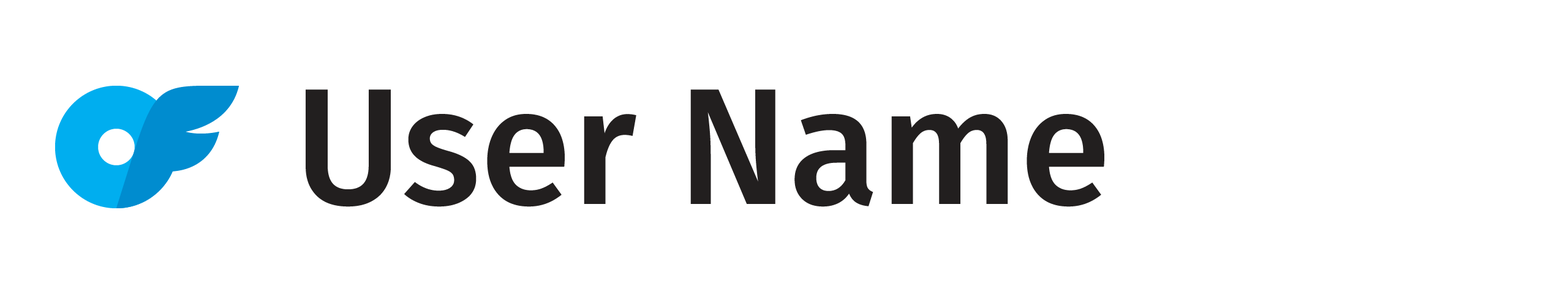
<style>
.page{position:relative;width:1568px;height:294px;background:#ffffff}
.page>*{position:absolute;margin:0}
.t1{font:165.4px "FiraSans-Medium";color:#231f20}
</style>
<div class="page">
<p class="t1" style="left:306px;top:89px;width:798px;height:118px">User Name</p>
</div>
